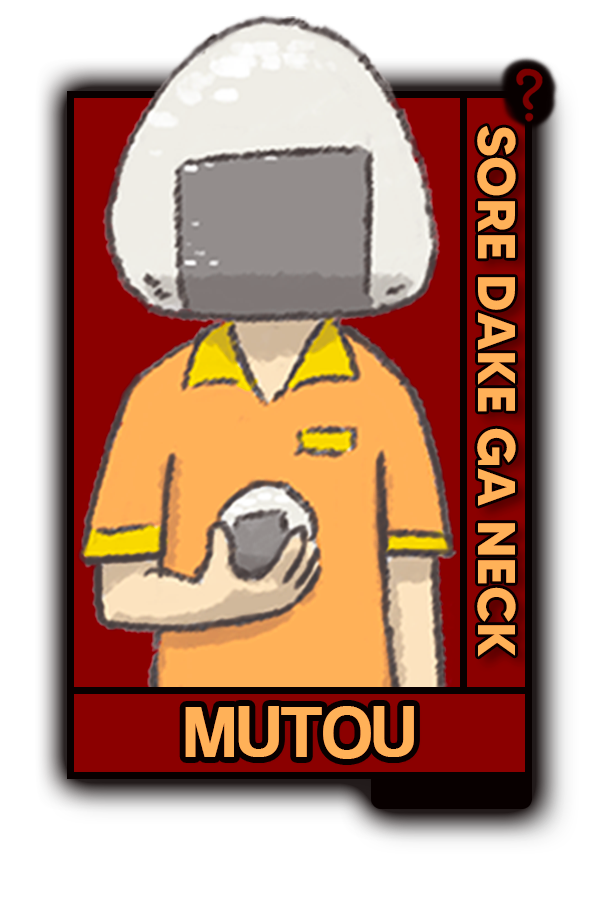
<style>
.page{position:relative;width:600px;height:900px;background:#ffffff}
.page>*{position:absolute;margin:0}
.t1{font:52.7px "MADETOMMY-Bold";color:#ffb158}
.t2{font:75px "CoolveticaRg-Regular";color:#ffb158}
</style>
<div class="page">
<p class="t1" style="left:477px;top:126px;width:39px;height:531px;rotate:90deg">SORE DAKE GA NECK</p>
<p class="t2" style="left:185px;top:706px;width:229px;height:53px">MUTOU</p>
</div>
